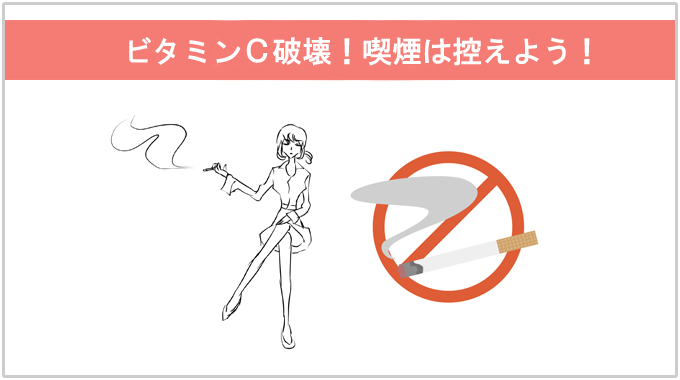
<style>
.page{position:relative;width:680px;height:380px;background:#ffffff}
.page>*{position:absolute;margin:0}
.t1{font:30px "HGGothicE";color:#ffffff}
</style>
<div class="page">
<p class="t1" style="left:129px;top:37px;width:461px;height:29px">ビタミンＣ破壊！喫煙は控えよう！</p>
</div>
